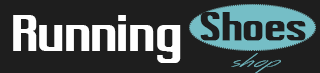
<style>
.page{position:relative;width:320px;height:73px;background:#1e1e1e}
.page>*{position:absolute;margin:0}
.t1{font:51.3px "MacType";color:#ffffff;scale:0.94 1}
.t2{font:38.3px "MacType";color:#1e1e1e;font-weight:bold}
.t3{font:52.9px "MacType";color:#ffffff}
.t4{font:24.7px "AcrosstheRoad";color:#75bec6;scale:1.71 1}
</style>
<div class="page">
<p class="t1" style="left:13px;top:15px;width:168px;height:48px">Running</p>
<p class="t2" style="left:200px;top:12px;width:106px;height:29px"><span class="t3"> </span>Shoes</p>
<p class="t4" style="left:231px;top:53px;width:50px;height:21px">shop</p>
</div>
